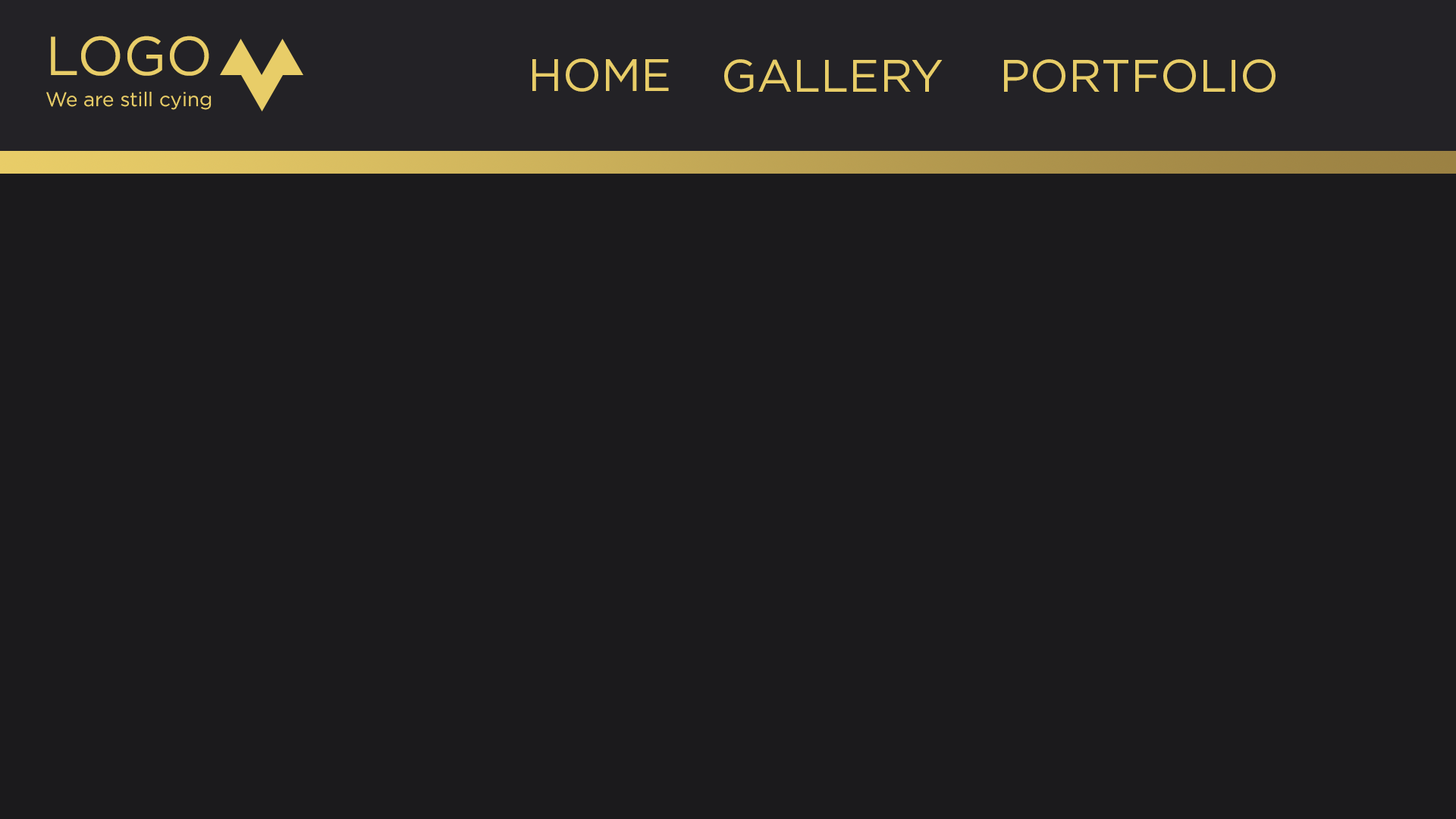
<style>
.page{position:relative;width:1456px;height:819px;background:#1b1a1c}
.page>*{position:absolute;margin:0}
.t1{font:54.6px "GothamPro";color:#e8cd68}
.t2{font:45.5px "GothamPro";color:#e8cd68}
.t3{font:19.7px "GothamPro";color:#e8cd68}
</style>
<div class="page">
<p class="t1" style="left:51px;top:36px;width:158px;height:40px">LOGO</p>
<p class="t2" style="left:532px;top:58px;width:137px;height:34px">HOME</p>
<p class="t2" style="left:724px;top:59px;width:219px;height:34px">GALLERY</p>
<p class="t2" style="left:1004px;top:59px;width:271px;height:34px">PORTFOLIO</p>
<p class="t3" style="left:46px;top:91px;width:166px;height:19px">We are still cying</p>
</div>
